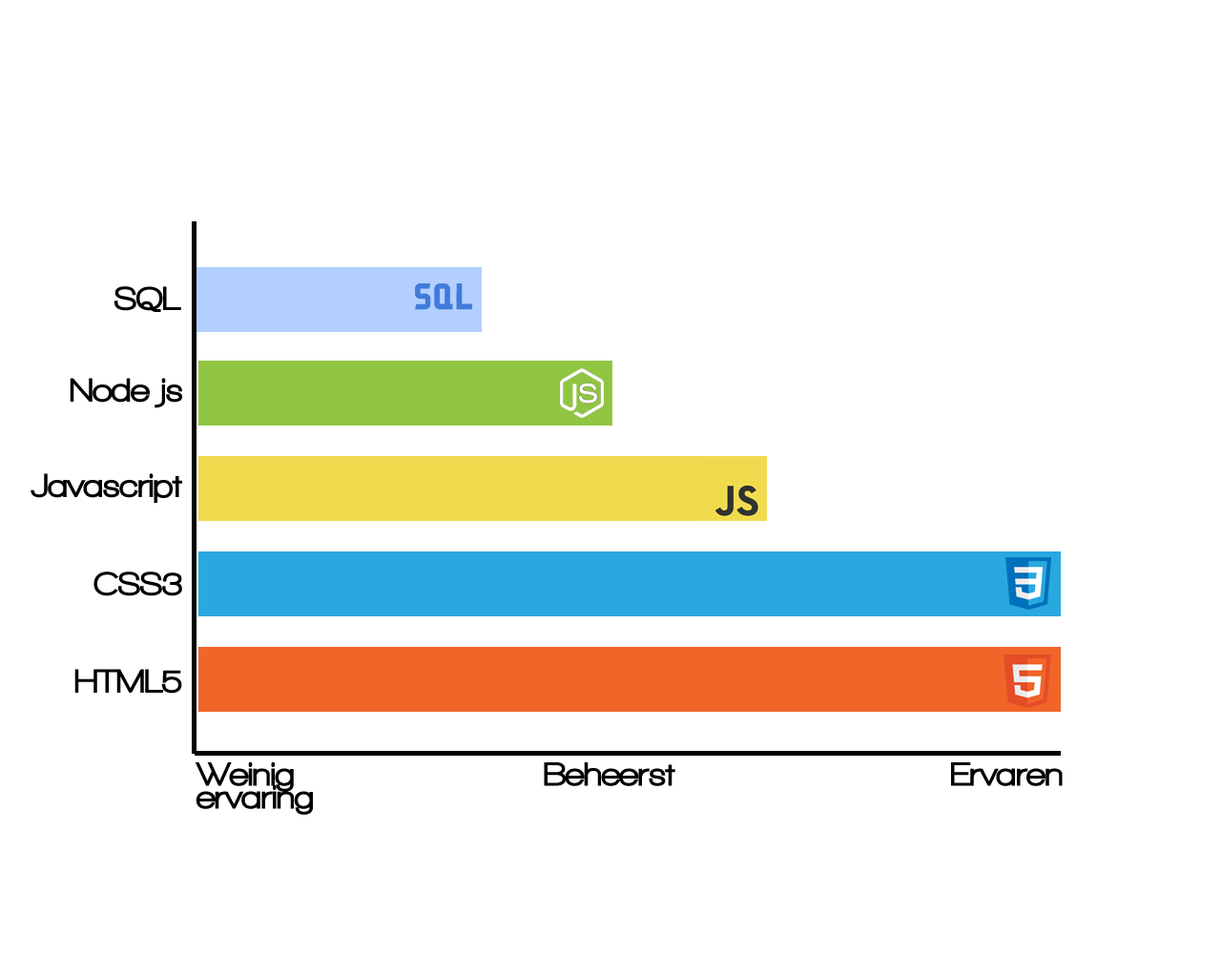
<style>
.page{position:relative;width:1221px;height:977px;background:#ffffff}
.page>*{position:absolute;margin:0}
.t1{font:34.3px "WalkwayBlack";color:#000000}
.t2{font:34.3px/22.9px "WalkwayBlack";color:#000000}
</style>
<div class="page">
<p class="t1" style="left:114px;top:286px;width:67px;height:26px">SQL</p>
<p class="t1" style="left:70px;top:378px;width:112px;height:30px">Node js</p>
<p class="t1" style="left:31px;top:473px;width:151px;height:30px">Javascript</p>
<p class="t1" style="left:93px;top:571px;width:89px;height:25px">CSS3</p>
<p class="t1" style="left:74px;top:669px;width:108px;height:24px">HTML5</p>
<p class="t2" style="left:195px;top:761px;width:118px;height:54px">Weinig <br>ervaring</p>
<p class="t1" style="left:544px;top:762px;width:131px;height:24px">Beheerst</p>
<p class="t1" style="left:951px;top:762px;width:112px;height:24px">Ervaren</p>
</div>
